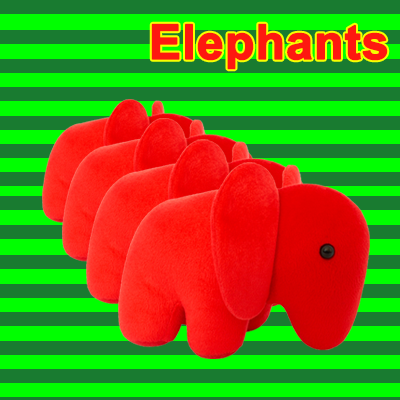
<style>
.page{position:relative;width:400px;height:400px;background:#00ff00}
.page>*{position:absolute;margin:0}
.t1{font:48px "Arial-BoldMT";color:#fe1810;font-weight:bold}
</style>
<div class="page">
<p class="t1" style="left:151px;top:23px;width:237px;height:47px">Elephants</p>
</div>
